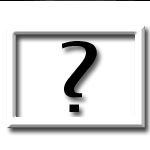
<style>
.page{position:relative;width:150px;height:150px;background:#ffffff}
.page>*{position:absolute;margin:0}
.t1{font:96px "Federo-Regular";letter-spacing:-0.04em;color:#000000}
</style>
<div class="page">
<p class="t1" style="left:62px;top:40px;width:35px;height:71px">?</p>
</div>
